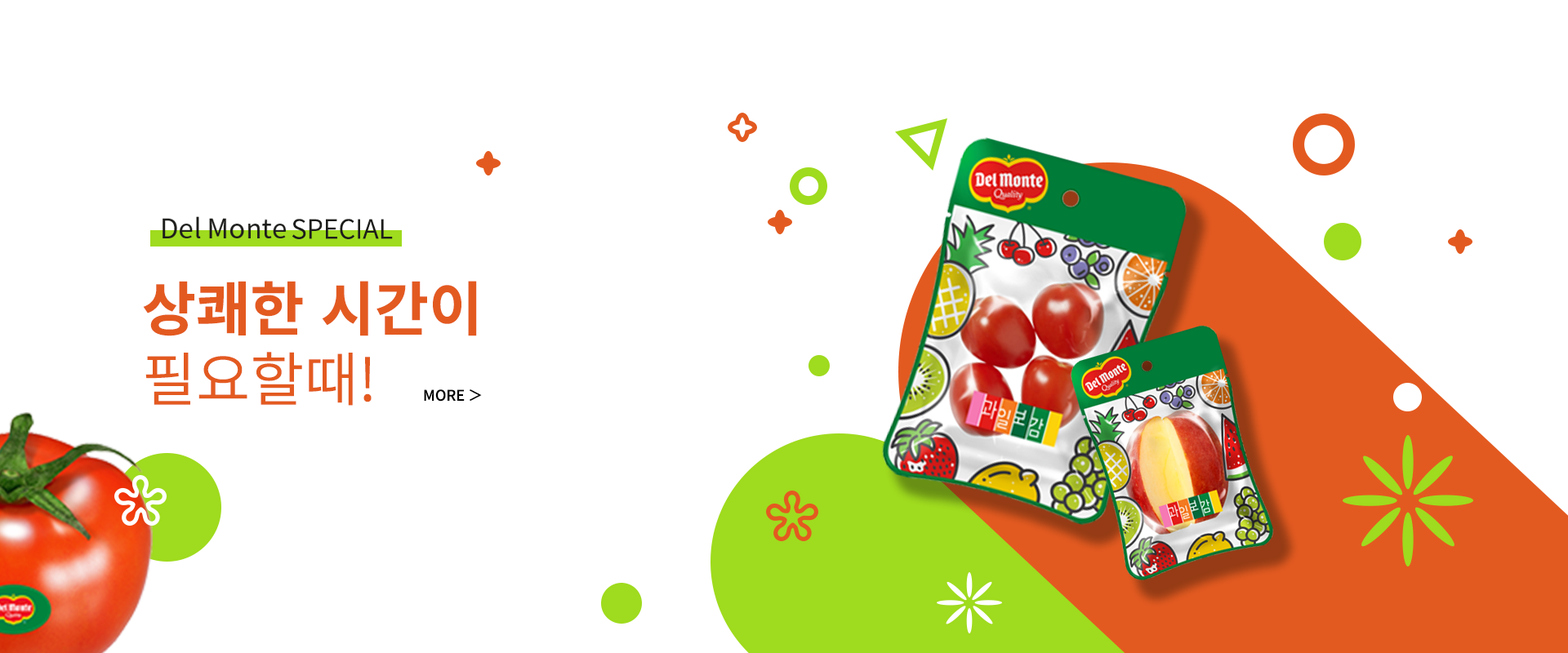
<style>
.page{position:relative;width:1568px;height:653px;background:#ffffff}
.page>*{position:absolute;margin:0}
.t1{font:26.5px "NotoSansCJKkr-DemiLight";color:#1d1d1b;text-transform:uppercase}
.t2{font:58.8px "NotoSansCJKkr-Bold";color:#e35a20;text-transform:uppercase}
.t3{font:58.8px "NotoSansCJKkr-DemiLight";color:#e35a20;text-transform:uppercase}
.t4{font:14.7px "NotoSansCJKkr-Medium";color:#000000;text-transform:uppercase}
.t5{font:14.7px "NotoSansCJKkr-Medium";color:#000000}
</style>
<div class="page">
<p class="t1" style="left:292px;top:219px;width:101px;height:20px">Special</p>
<p class="t2" style="left:143px;top:281px;width:334px;height:125px">상쾌한 시간이<br><span class="t3">필요할때!</span></p>
<p class="t4" style="left:424px;top:390px;width:58px;height:12px">MORE <span class="t5">&gt;</span></p>
</div>
